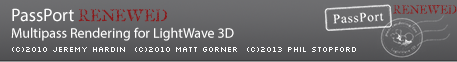
<style>
.page{position:relative;width:457px;height:62px}
.page>*{position:absolute;margin:0}
.t1{font:10px "OldRubberStamp";color:#8a181a}
.t2{font:14px "MyriadPro-Regular";color:#ffffff}
.t3{font:18px "MyriadPro-Regular";color:#ffffff}
.t4{font:14px "OldRubberStamp";color:#8a181a}
.t5{font:8px "Silkscreen";color:#ffffff}
</style>
<div class="page">
<p class="t1" style="left:393px;top:5px;width:64px;height:9px">RENEWED</p>
<p class="t2" style="left:11px;top:8px;width:223px;height:33px"><span class="t3">PassPort </span><span class="t4">RENEWED <br></span>Multipass Rendering for LightWave 3D</p>
<p class="t5" style="left:12px;top:47px;width:344px;height:5px">(C)2010 Jeremy Hardin  (c)2010 matt gorner  (c)2013 phil stopford</p>
</div>
